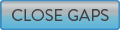
<style>
.page{position:relative;width:120px;height:30px}
.page>*{position:absolute;margin:0}
.t1{font:16.7px "BrandonGrotesque-Regular";color:#404041}
</style>
<div class="page">
<p class="t1" style="left:12px;top:9px;width:97px;height:12px">CLOSE GAPS</p>
</div>
